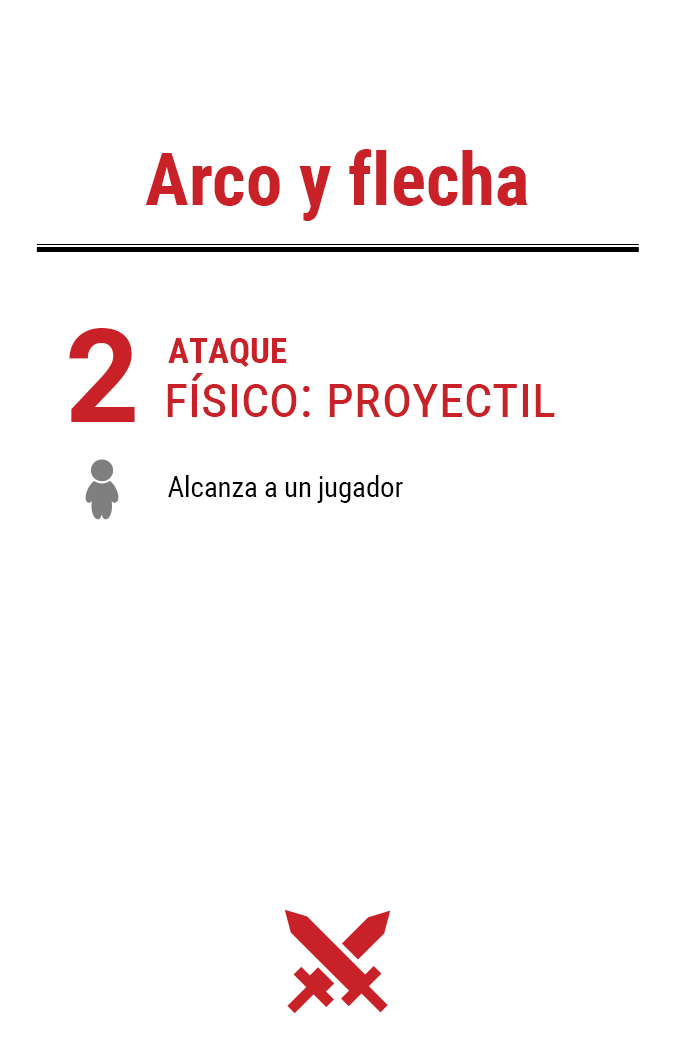
<style>
.page{position:relative;width:675px;height:1050px;background:#ffffff}
.page>*{position:absolute;margin:0}
.t1{font:72.9px "RobotoCondensed-Bold";color:#c82127}
.t2{font:130px "Roboto-Bold";letter-spacing:-0.06em;color:#c82127}
.t3{font:35px "RobotoCondensed-Bold";color:#c82127}
.t4{font:58.3px "RobotoCondensed-Regular";color:#c82127;font-variant:small-caps}
.t5{font:29.2px "RobotoCondensed-Regular";letter-spacing:-0.01em;color:#000000}
</style>
<div class="page">
<p class="t1" style="left:145px;top:149px;width:383px;height:72px">Arco y flecha</p>
<p class="t2" style="left:69px;top:328px;width:66px;height:94px">2</p>
<p class="t3" style="left:168px;top:338px;width:119px;height:29px">ATAQUE</p>
<p class="t4" style="left:167px;top:373px;width:388px;height:44px">físico: proyectil</p>
<p class="t5" style="left:168px;top:475px;width:235px;height:28px">Alcanza a un jugador</p>
</div>
